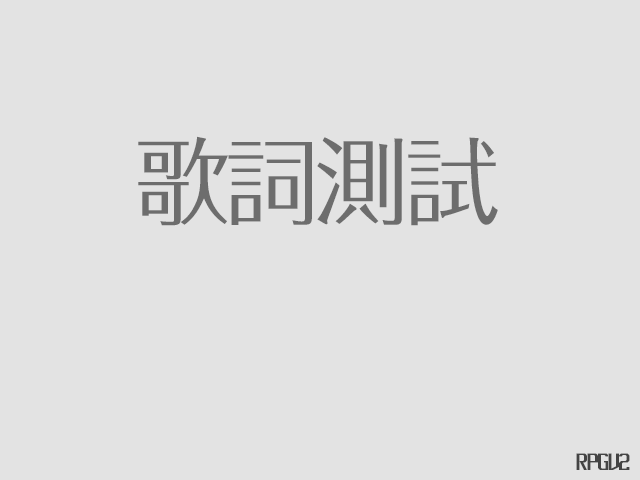
<style>
.page{position:relative;width:640px;height:480px;background:#e3e3e3}
.page>*{position:absolute;margin:0}
.t1{font:96px "FolkPro-Regular";letter-spacing:-0.06em;color:#6d6d6d}
.t2{font:24px "Dukungan";letter-spacing:-0.06em;color:#444444}
</style>
<div class="page">
<p class="t1" style="left:138px;top:136px;width:360px;height:90px">歌詞測試</p>
<p class="t2" style="left:576px;top:453px;width:54px;height:17px">RPGV2</p>
</div>
